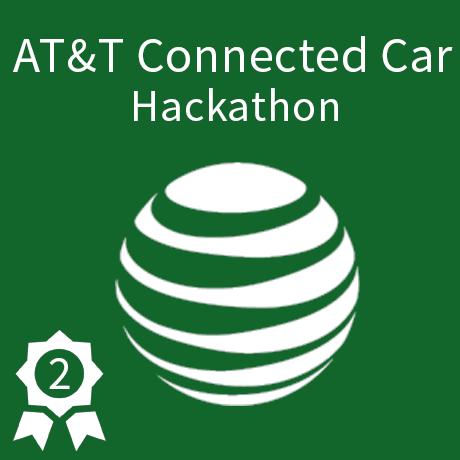
<style>
.page{position:relative;width:460px;height:460px;background:#12662c}
.page>*{position:absolute;margin:0}
.t1{font:50px "SourceSansPro-Regular";letter-spacing:0.015em;color:#ffffff}
.t2{font:45px "SourceSansPro-Regular";letter-spacing:0.015em;color:#ffffff}
.t3{font:48px "SourceSansPro-Regular";letter-spacing:0.015em;color:#ffffff}
</style>
<div class="page">
<p class="t1" style="left:13px;top:36px;width:440px;height:36px">AT&amp;T Connected Car</p>
<p class="t2" style="left:134px;top:88px;width:204px;height:33px">Hackathon</p>
<p class="t3" style="left:49px;top:358px;width:21px;height:31px">2</p>
</div>
